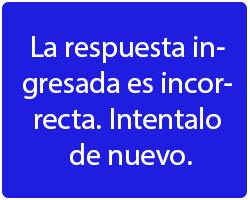
<style>
.page{position:relative;width:250px;height:200px;background:#1e1de0}
.page>*{position:absolute;margin:0}
.t1{font:30px "MyriadHebrew-Regular";color:#ffffff}
</style>
<div class="page">
<p class="t1" style="left:23px;top:36px;width:209px;height:129px;text-align:center">La respuesta ingresada es incorrecta  Intentalo de nuevo</p>
<p class="t1" style="left:97px;top:125px;width:4px;height:4px">.</p>
<p class="t1" style="left:188px;top:161px;width:4px;height:4px">.</p>
</div>
